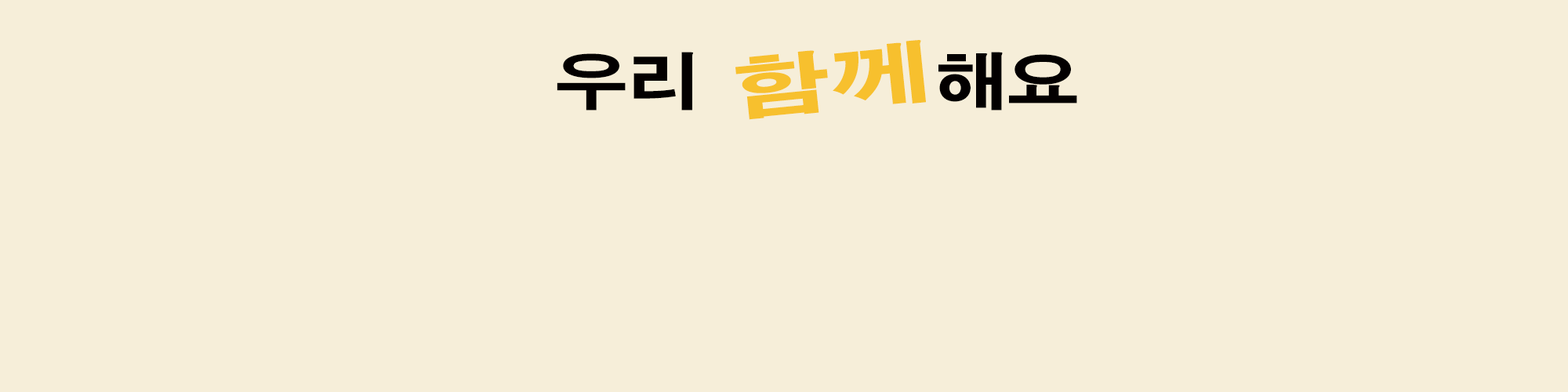
<style>
.page{position:relative;width:1568px;height:392px;background:#f6eed9}
.page>*{position:absolute;margin:0}
.t1{font:66.6px "AdobeGothicStd-Bold";color:#f7c02e;scale:1.5 1}
.t2{font:61.8px "AdobeGothicStd-Bold";color:#030000;scale:1.17 1}
</style>
<div class="page">
<p class="t1" style="left:735px;top:40px;width:191px;height:80px;rotate:-6deg">함께</p>
<p class="t2" style="left:557px;top:52px;width:520px;height:59px">우리               해요</p>
</div>
